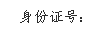
<style>
.page{position:relative;width:94px;height:30px;background:#ffffff}
.page>*{position:absolute;margin:0}
.t1{font:14px "FangSong_GB2312";letter-spacing:0.06em;color:#2b2b2b}
</style>
<div class="page">
<p class="t1" style="left:20px;top:10px;width:62px;height:13px">身份证号：</p>
</div>
